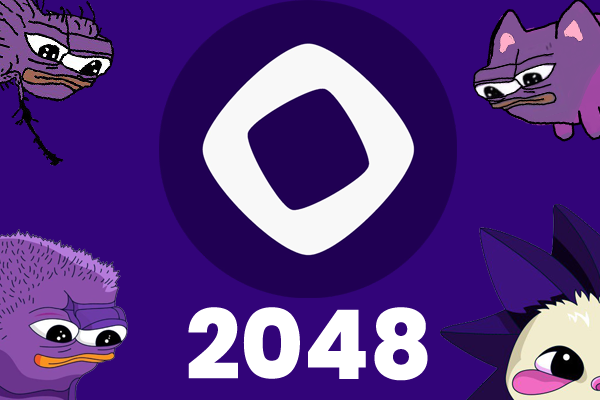
<style>
.page{position:relative;width:600px;height:400px;background:#320479}
.page>*{position:absolute;margin:0}
.t1{font:96px "Poppins-ExtraBold";color:#ffffff}
</style>
<div class="page">
<p class="t1" style="left:188px;top:307px;width:240px;height:74px">2048</p>
</div>
